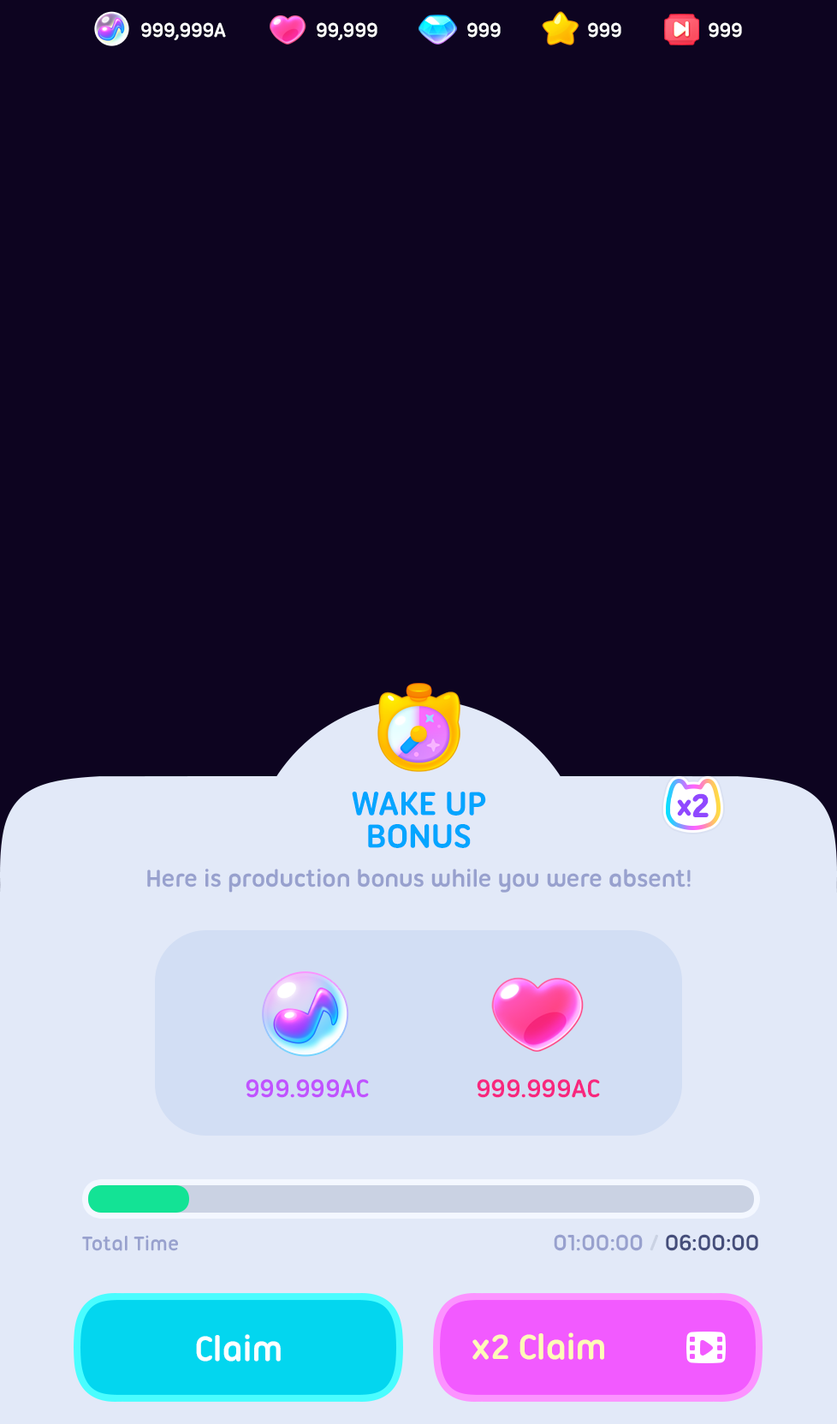
<style>
.page{position:relative;width:837px;height:1424px;background:#0d0420}
.page>*{position:absolute;margin:0}
.t1{font:21.4px "UbuntuTitling-Bold";letter-spacing:-0.025em;color:#ffffff}
.t2{font:36px/32.5px "UbuntuTitling-Bold";letter-spacing:-0.025em;color:#05a5ff;text-transform:uppercase}
.t3{font:29.1px "UbuntuTitling-Bold";letter-spacing:-0.05em;color:#9048ff;font-weight:bold}
.t4{font:34.2px "UbuntuTitling-Bold";letter-spacing:-0.05em;color:#9048ff;font-weight:bold}
.t5{font:25.7px "UbuntuTitling-Bold";letter-spacing:-0.025em;color:#98a1ce}
.t6{font:27.4px "UbuntuTitling-Bold";letter-spacing:-0.025em;color:#c053ff;text-transform:uppercase}
.t7{font:27.4px "UbuntuTitling-Bold";letter-spacing:-0.025em;color:#f7277e;text-transform:uppercase}
.t8{font:21.4px "UbuntuTitling-Bold";letter-spacing:-0.025em;color:#98a1ce}
.t9{font:24px "UbuntuTitling-Bold";letter-spacing:-0.025em;color:#98a1ce}
.t10{font:24px "UbuntuTitling-Bold";letter-spacing:-0.025em;color:#cad2e3}
.t11{font:24px "UbuntuTitling-Bold";letter-spacing:-0.025em;color:#454e7b}
.t12{font:37.7px "UbuntuTitling-Bold";letter-spacing:-0.025em;color:#ffffff}
.t13{font:37.7px "UbuntuTitling-Bold";letter-spacing:-0.025em;color:#fefbb7}
</style>
<div class="page">
<p class="t1" style="left:141px;top:22px;width:85px;height:18px">999,999A</p>
<p class="t1" style="left:317px;top:22px;width:60px;height:18px">99,999</p>
<p class="t1" style="left:467px;top:22px;width:34px;height:16px">999</p>
<p class="t1" style="left:588px;top:22px;width:33px;height:16px">999</p>
<p class="t1" style="left:709px;top:22px;width:33px;height:16px">999</p>
<p class="t2" style="left:352px;top:792px;width:134px;height:56px;text-align:center">Wake up<br>bonus</p>
<p class="t3" style="left:677px;top:794px;width:32px;height:23px">x<span class="t4">2</span></p>
<p class="t5" style="left:147px;top:869px;width:544px;height:24px">Here is production bonus while you were absent!</p>
<p class="t6" style="left:246px;top:1079px;width:123px;height:19px">999.999AC</p>
<p class="t7" style="left:477px;top:1079px;width:123px;height:19px">999.999AC</p>
<p class="t8" style="left:82px;top:1235px;width:96px;height:16px">Total Time</p>
<p class="t9" style="left:554px;top:1234px;width:89px;height:17px">01:00:00</p>
<p class="t10" style="left:650px;top:1234px;width:8px;height:17px">/</p>
<p class="t11" style="left:666px;top:1234px;width:92px;height:17px">06:00:00</p>
<p class="t12" style="left:196px;top:1334px;width:85px;height:28px">Claim</p>
<p class="t13" style="left:473px;top:1333px;width:131px;height:27px">x2 Claim</p>
</div>
